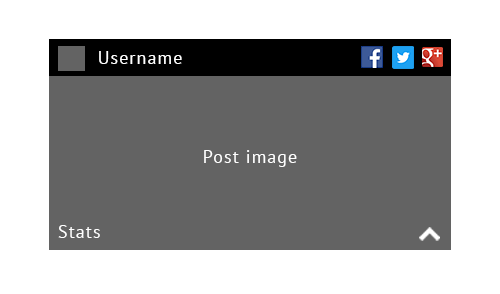
<style>
.page{position:relative;width:500px;height:294px;background:#636363}
.page>*{position:absolute;margin:0}
.t1{font:18px "PTSans-Regular";letter-spacing:0.06em;color:#ffffff}
</style>
<div class="page">
<p class="t1" style="left:99px;top:51px;width:83px;height:13px">Username</p>
<p class="t1" style="left:204px;top:150px;width:93px;height:17px">Post image</p>
<p class="t1" style="left:58px;top:225px;width:42px;height:13px">Stats</p>
</div>
